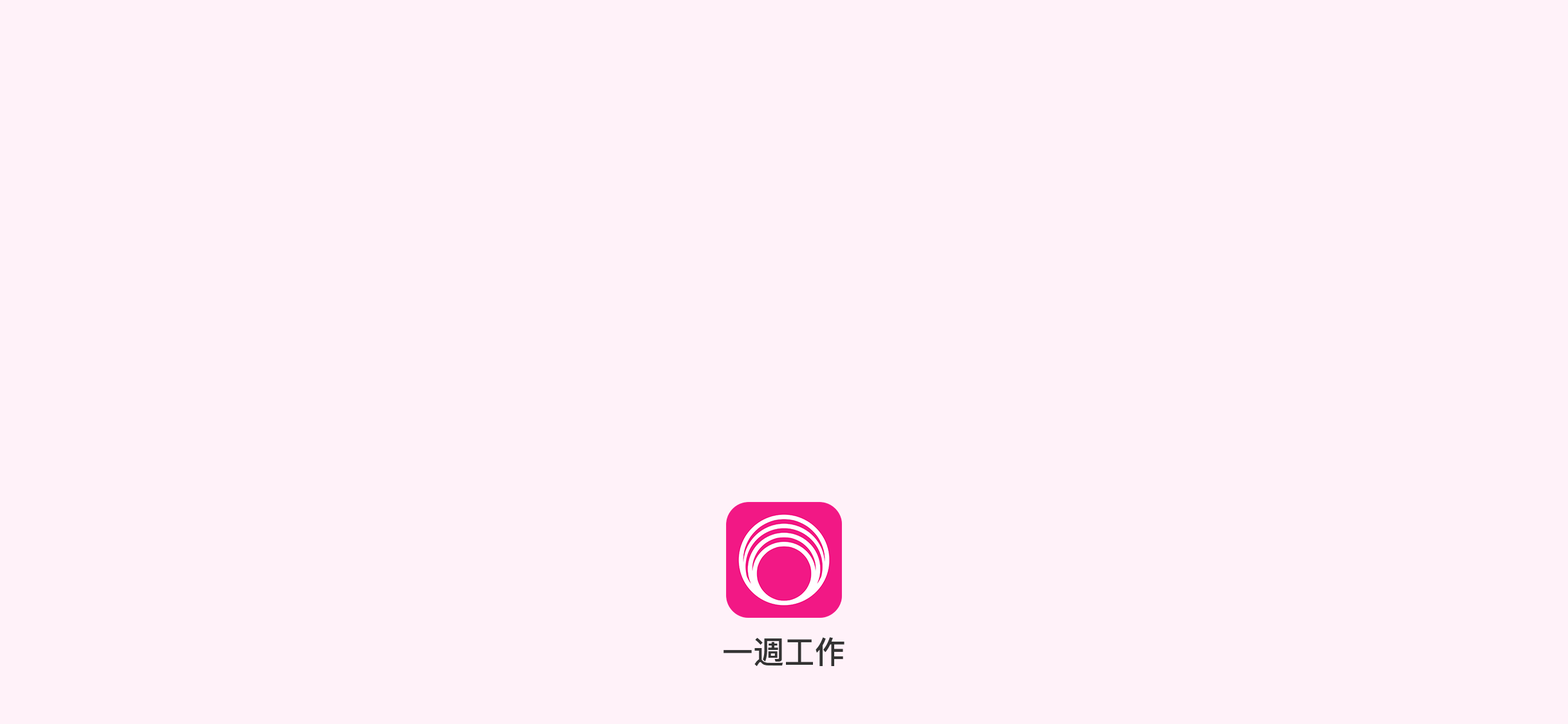
<style>
.page{position:relative;width:1568px;height:724px;background:#fff2f9}
.page>*{position:absolute;margin:0}
.t1{font:30.9px "PingFang-SC-Bold";color:#333333}
</style>
<div class="page">
<p class="t1" style="left:723px;top:637px;width:122px;height:29px">一週工作</p>
</div>
